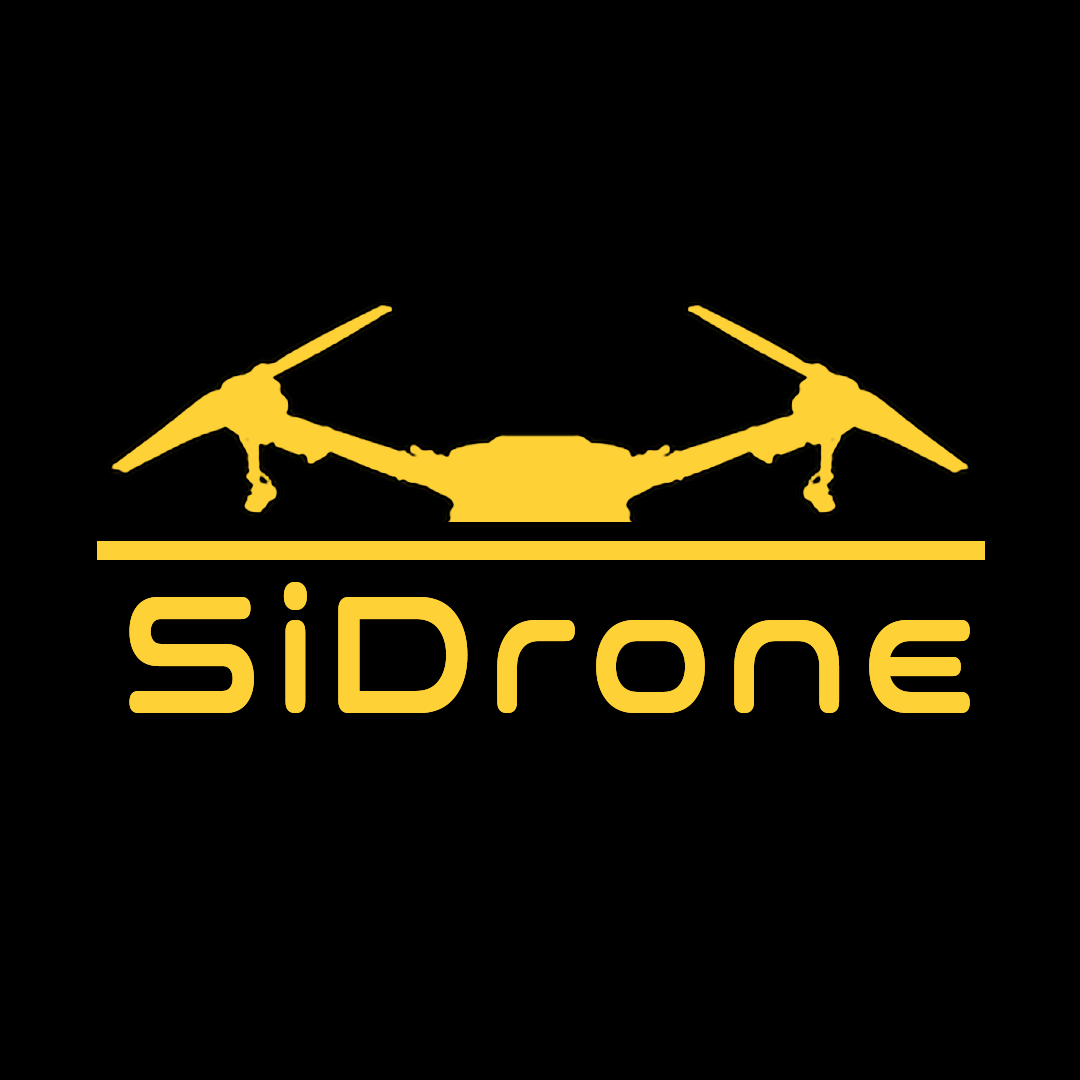
<style>
.page{position:relative;width:1080px;height:1080px;background:#000000}
.page>*{position:absolute;margin:0}
.t1{font:164.9px "SpaceColony-SemiBold";letter-spacing:0.1em;color:#fed136;scale:0.83 1}
</style>
<div class="page">
<p class="t1" style="left:129px;top:582px;width:841px;height:131px">SiDrone</p>
</div>
